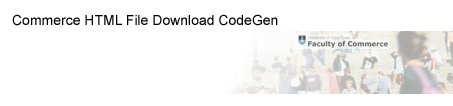
<style>
.page{position:relative;width:453px;height:106px;background:#ffffff}
.page>*{position:absolute;margin:0}
.t1{font:14px "ArialMT";color:#000000}
</style>
<div class="page">
<p class="t1" style="left:12px;top:14px;width:266px;height:12px">Commerce HTML File Download CodeGen</p>
</div>
